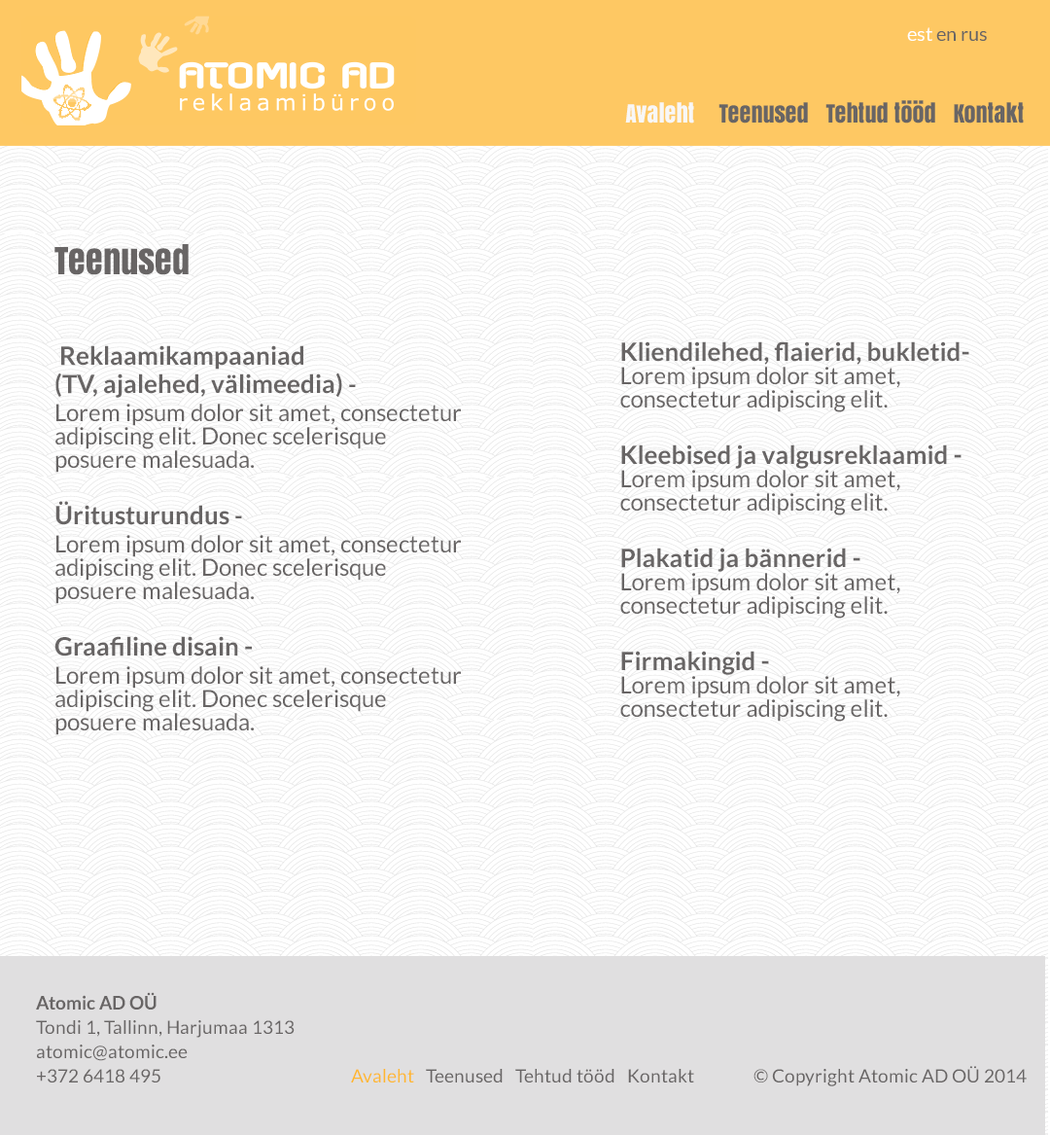
<style>
.page{position:relative;width:1050px;height:1135px;background:#ffffff}
.page>*{position:absolute;margin:0}
.t1{font:19.5px "Lato-Regular";color:#686565}
.t2{font:19.5px "Lato-Regular";color:#ffffff}
.t3{font:23.3px "Anton";color:#686565}
.t4{font:23.3px "Anton";color:#f8f7f6}
.t5{font:35px "Anton";color:#686565}
.t6{font:23.3px/23.3px "Lato-Regular";color:#686565}
.t7{font:25.3px/23.3px "Lato-Bold";color:#686565}
.t8{font:23.3px/23.3px "Lato-Bold";color:#686565}
.t9{font:18.5px/19.5px "Lato-Regular";color:#686565}
.t10{font:18.5px/19.5px "Lato-Bold";color:#686565}
.t11{font:18.5px "Lato-Regular";color:#686565}
.t12{font:18.5px "Lato-Regular";color:#feb730}
</style>
<div class="page">
<p class="t1" style="left:908px;top:27px;width:79px;height:14px"><span class="t2">est </span>en rus</p>
<p class="t3" style="left:625px;top:100px;width:399px;height:24px"><span class="t4">Avaleht    </span> Teenused   Tehtud tööd   Kontakt</p>
<p class="t5" style="left:54px;top:244px;width:135px;height:31px">Teenused</p>
<p class="t6" style="left:621px;top:341px;width:349px;height:381px"><span class="t7">Kliendilehed, flaierid, bukletid- <br></span>Lorem ipsum dolor sit amet, consectetur adipiscing elit. <br><span class="t7"><br>Kleebised ja valgusreklaamid -<br></span>Lorem ipsum dolor sit amet, consectetur adipiscing elit.  <br><span class="t7"><br>Plakatid ja bännerid -<br></span>Lorem ipsum dolor sit amet, consectetur adipiscing elit. <br><span class="t7"><br>Firmakingid -<br></span>Lorem ipsum dolor sit amet, consectetur adipiscing elit.</p>
<p class="t6" style="left:54px;top:345px;width:407px;height:390px"><span class="t7"> Reklaamikampaaniad <br>(TV, ajalehed, välimeedia)</span><span class="t8"> -<br></span>Lorem ipsum dolor sit amet, consectetur adipiscing elit. Donec scelerisque posuere malesuada. <br><br><span class="t7">Üritusturundus </span><span class="t8">-<br></span>Lorem ipsum dolor sit amet, consectetur adipiscing elit. Donec scelerisque posuere malesuada. <br><span class="t7"><br>Graafiline disain -<br></span>Lorem ipsum dolor sit amet, consectetur adipiscing elit. Donec scelerisque posuere malesuada.</p>
<p class="t9" style="left:36px;top:992px;width:259px;height:91px"><span class="t10">Atomic AD OÜ<br></span>Tondi 1, Tallinn, Harjumaa 1313<br>atomic@atomic.ee<br>+372 6418 495</p>
<p class="t11" style="left:351px;top:1069px;width:343px;height:14px"><span class="t12">Avaleht   </span>Teenused   Tehtud tööd   Kontakt</p>
<p class="t11" style="left:754px;top:1066px;width:273px;height:20px">© Copyright Atomic AD OÜ 2014</p>
</div>
